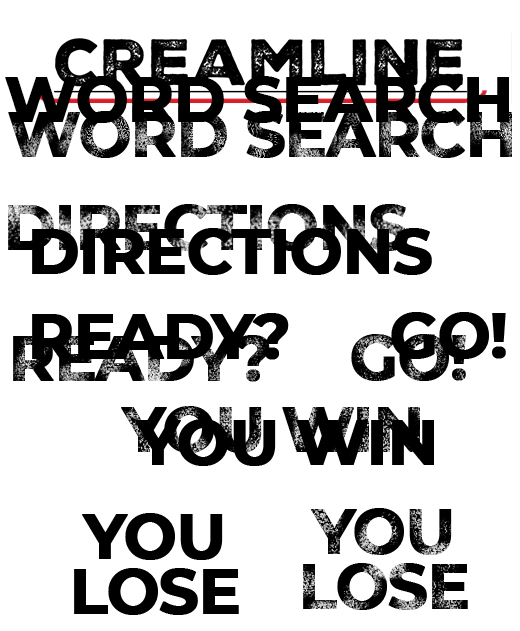
<style>
.page{position:relative;width:520px;height:631px;background:#ffffff}
.page>*{position:absolute;margin:0}
.t1{font:62.7px "Montserrat-Bold";letter-spacing:-0.03em;color:#000000;font-weight:bold}
.t2{font:62.7px/55px "Montserrat-Bold";letter-spacing:-0.03em;color:#000000;font-weight:bold}
</style>
<div class="page">
<p class="t1" style="left:5px;top:76px;width:504px;height:47px">WORD SEARCH</p>
<p class="t1" style="left:32px;top:228px;width:400px;height:47px">DIRECTIONS</p>
<p class="t1" style="left:32px;top:313px;width:257px;height:47px">READY?</p>
<p class="t1" style="left:391px;top:312px;width:115px;height:47px">GO!</p>
<p class="t1" style="left:135px;top:419px;width:299px;height:47px">YOU WIN</p>
<p class="t2" style="left:74px;top:513px;width:165px;height:102px;text-align:center">YOU<br>LOSE</p>
</div>
